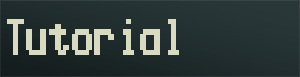
<style>
.page{position:relative;width:300px;height:77px}
.page>*{position:absolute;margin:0}
.t1{font:40.9px "PressStartK";color:#d8dac2;scale:0.55 1}
</style>
<div class="page">
<p class="t1" style="left:7px;top:19px;width:172px;height:36px">Tutorial</p>
</div>
